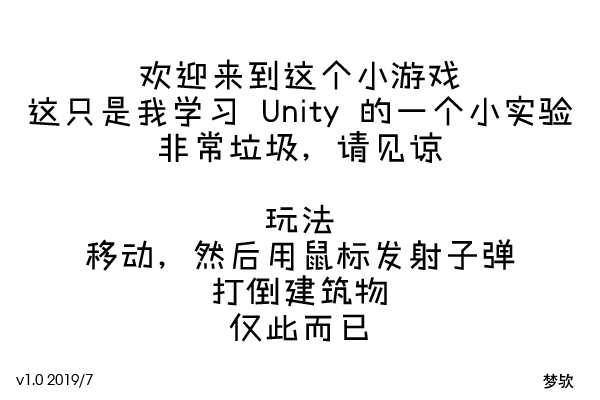
<style>
.page{position:relative;width:600px;height:400px;background:#ffffff}
.page>*{position:absolute;margin:0}
.t1{font:36px/36px "HYShuaiXianTiW";color:#000000}
.t2{font:36px/30px "HYShuaiXianTiW";color:#000000}
.t3{font:16px "AvantGarGotItcTEE-Book";color:#000000}
.t4{font:16px "AdobeHeitiStd-Regular";color:#000000}
</style>
<div class="page">
<p class="t1" style="left:28px;top:59px;width:545px;height:283px;text-align:center"><span class="t2">欢迎来到这个小游戏<br></span>这只是我学习 Unity 的一个小实验<br>非常垃圾，请见谅<br><br>玩法<br>移动，然后用鼠标发射子弹<br>打倒建筑物<br>仅此而已</p>
<p class="t3" style="left:16px;top:374px;width:77px;height:14px">v1.0 2019/7</p>
<p class="t4" style="left:543px;top:373px;width:31px;height:16px">梦欤</p>
</div>
